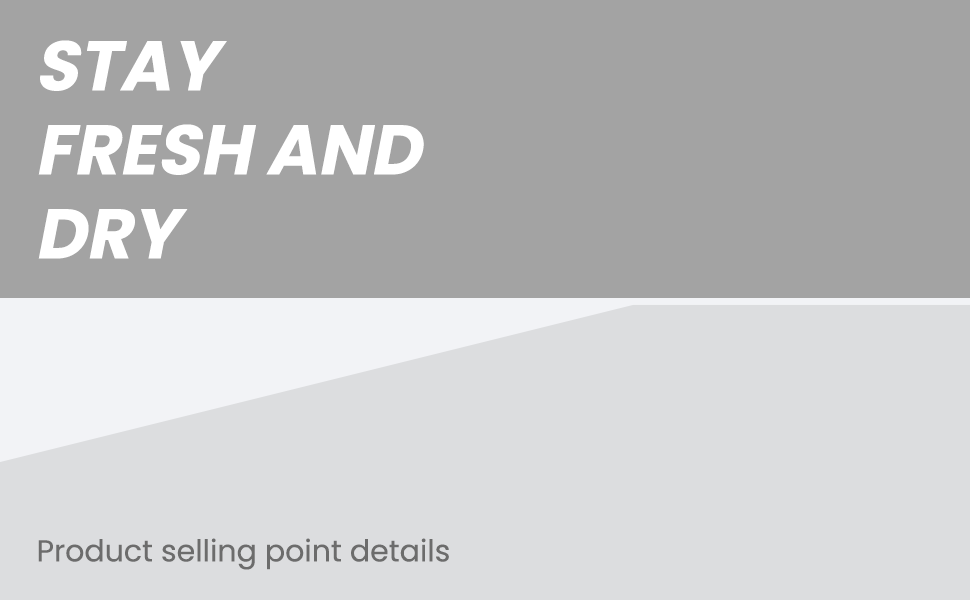
<style>
.page{position:relative;width:970px;height:600px;background:#a3a3a3}
.page>*{position:absolute;margin:0}
.t1{font:70px "Poppins-Bold";color:#ffffff;text-transform:uppercase;font-style:italic}
.t2{font:30px "Poppins-Regular";color:#6c6c6c}
</style>
<div class="page">
<p class="t1" style="left:38px;top:40px;width:386px;height:219px">STAY<br>FRESH AND<br>DRY</p>
<p class="t2" style="left:38px;top:538px;width:411px;height:32px">Product selling point details</p>
</div>
